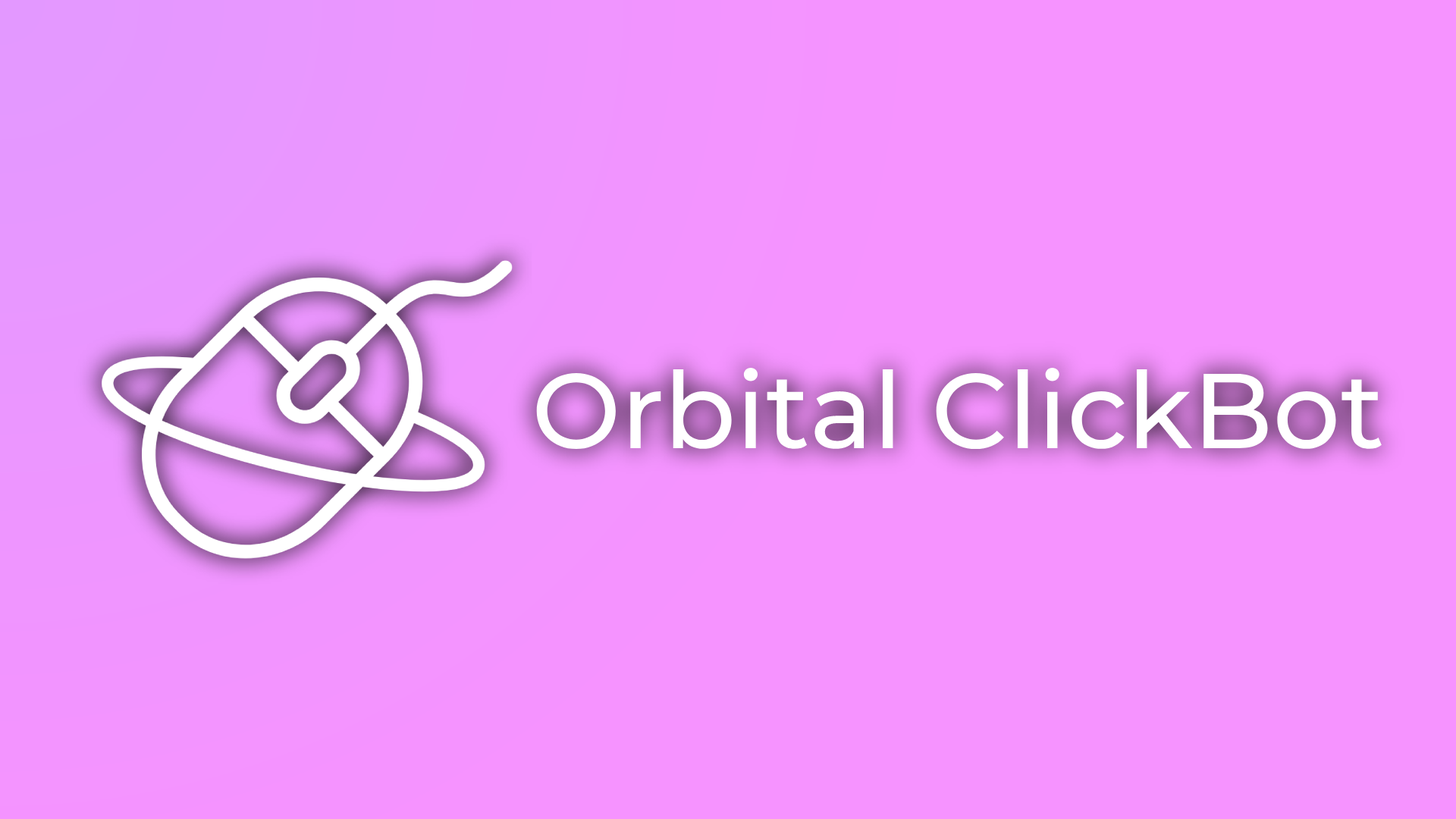
<style>
.page{position:relative;width:1456px;height:819px;background:#f693ff}
.page>*{position:absolute;margin:0}
.t1{font:106.2px "Montserrat-Medium";color:#ffffff}
</style>
<div class="page">
<p class="t1" style="left:536px;top:368px;width:846px;height:82px">Orbital ClickBot</p>
</div>
